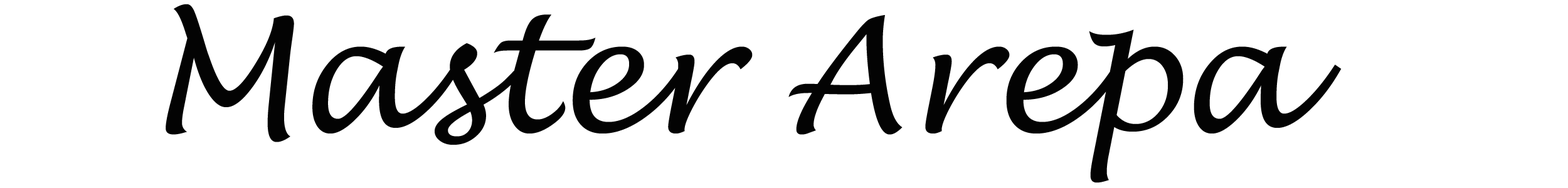
<style>
.page{position:relative;width:1568px;height:188px;background:#ffffff}
.page>*{position:absolute;margin:0}
.t1{font:156.8px "LucidaHandwriting-Italic";color:#030303}
</style>
<div class="page">
<p class="t1" style="left:166px;top:4px;width:1176px;height:179px">Master Arepa</p>
</div>
